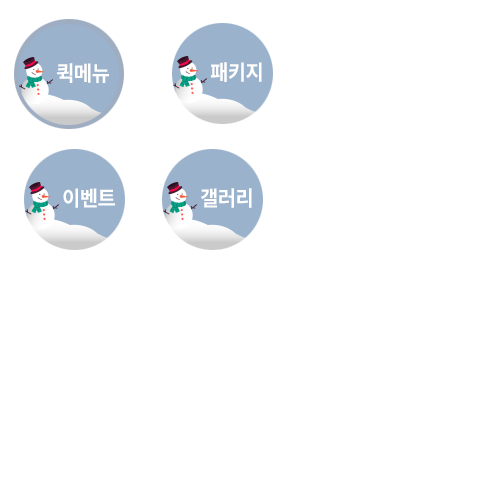
<style>
.page{position:relative;width:500px;height:500px;background:#ffffff}
.page>*{position:absolute;margin:0}
.t1{font:21px "NotoSansKR-Bold";letter-spacing:-0.03em;color:#ffffff;scale:0.95 1}
</style>
<div class="page">
<p class="t1" style="left:56px;top:63px;width:53px;height:20px">퀵메뉴</p>
<p class="t1" style="left:210px;top:62px;width:52px;height:20px">패키지</p>
<p class="t1" style="left:63px;top:188px;width:52px;height:20px">이벤트</p>
<p class="t1" style="left:201px;top:188px;width:51px;height:20px">갤러리</p>
</div>
